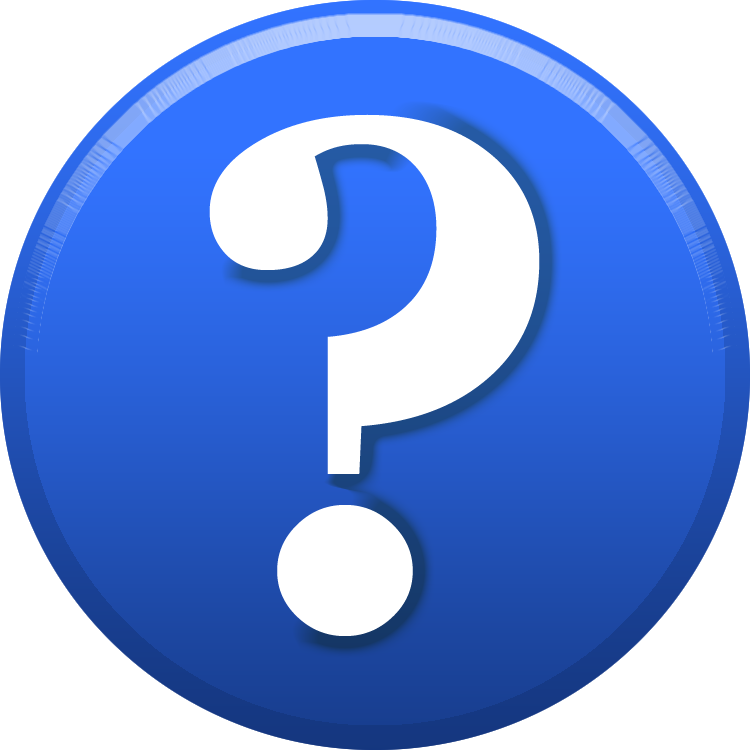
<style>
.page{position:relative;width:750px;height:750px;background:#ffffff}
.page>*{position:absolute;margin:0}
.t1{font:720px "Georgia-Bold";color:#ffffff}
</style>
<div class="page">
<p class="t1" style="left:209px;top:114px;width:331px;height:522px">?</p>
</div>
